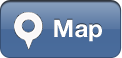
<style>
.page{position:relative;width:122px;height:58px}
.page>*{position:absolute;margin:0}
.t1{font:24px "HelveticaNeue-Bold";color:#ffffff}
</style>
<div class="page">
<p class="t1" style="left:54px;top:19px;width:48px;height:23px">Map</p>
</div>
